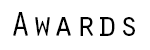
<style>
.page{position:relative;width:150px;height:50px;background:#ffffff}
.page>*{position:absolute;margin:0}
.t1{font:36px "OratorStd";color:#000000}
</style>
<div class="page">
<p class="t1" style="left:13px;top:12px;width:122px;height:24px">Awards</p>
</div>
